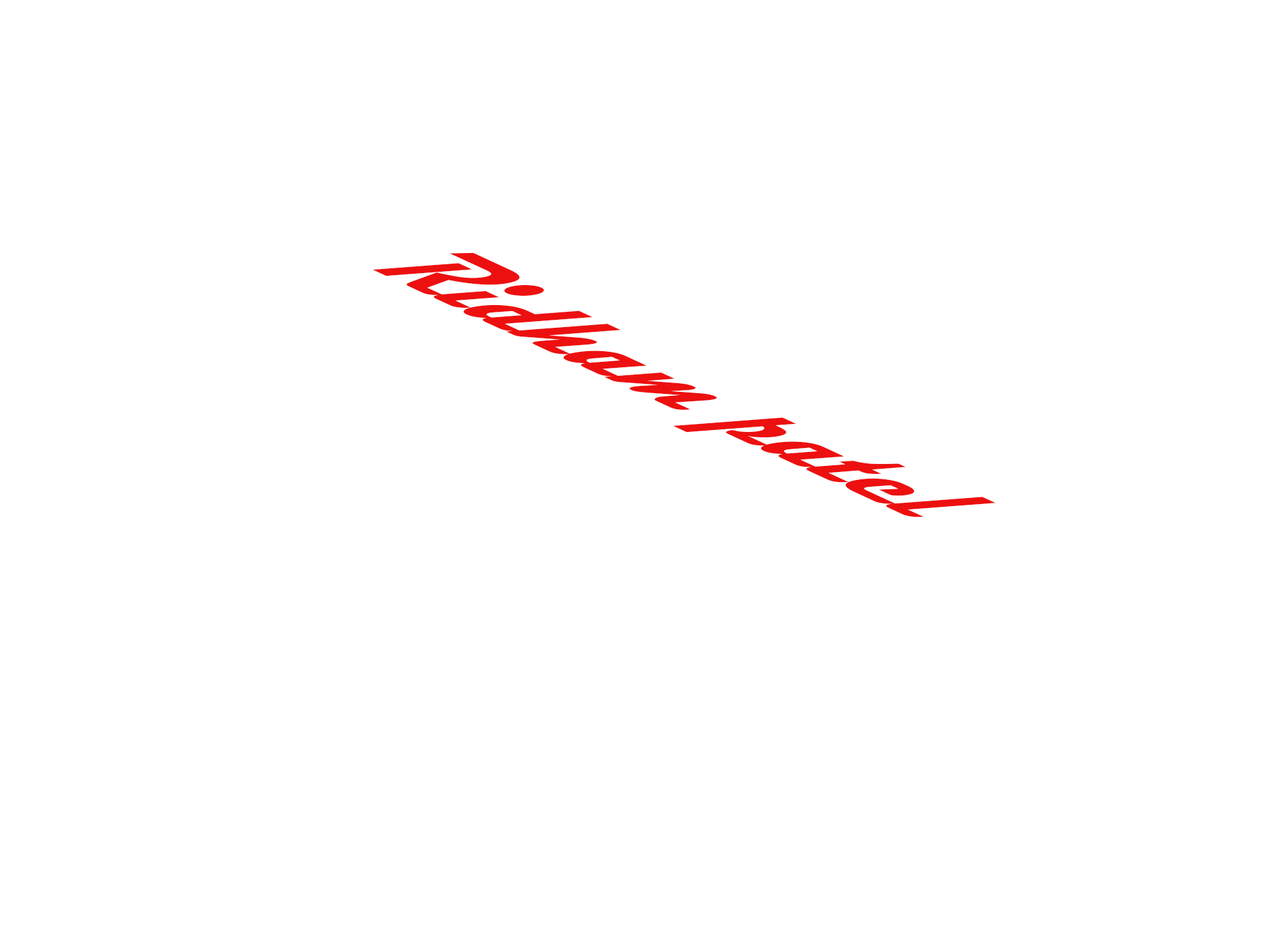
<style>
.page{position:relative;width:1261px;height:946px;background:#ffffff}
.page>*{position:absolute;margin:0}
.t1{font:148.1px "Magneto-Bold";color:#ed1010;scale:0.56 1}
</style>
<div class="page">
<p class="t1" style="left:372px;top:252px;width:624px;height:265px;rotate:25deg">Ridham patel</p>
</div>
